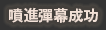
<style>
.page{position:relative;width:106px;height:30px;background:#44403c}
.page>*{position:absolute;margin:0}
.t1{font:15px "GothicMB101Pro-DeBold";color:#f2e1d7}
</style>
<div class="page">
<p class="t1" style="left:9px;top:7px;width:89px;height:16px">噴進彈幕成功</p>
</div>
